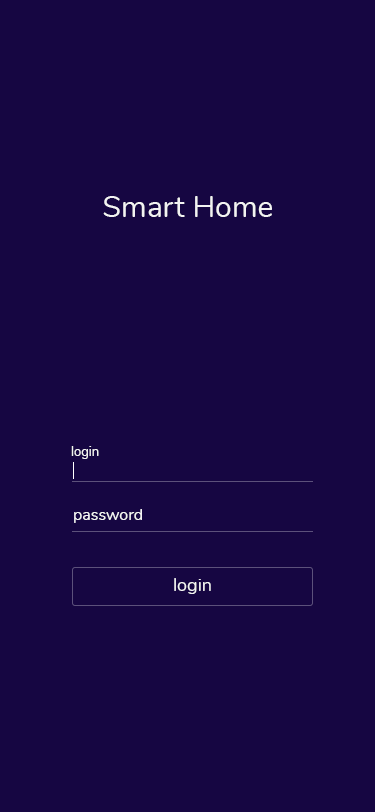
<style>
.page{position:relative;width:375px;height:812px;background:#160642}
.page>*{position:absolute;margin:0}
.t1{font:30px "Nunito-Regular";color:#f3f3f3}
.t2{font:13px "Nunito-Regular";color:#f3f3f3}
.t3{font:16px "Nunito-Regular";color:#f3f3f3}
.t4{font:18px "Nunito-Regular";color:#f3f3f3}
</style>
<div class="page">
<p class="t1" style="left:103px;top:196px;width:169px;height:21px">Smart Home</p>
<p class="t2" style="left:71px;top:446px;width:28px;height:13px">login</p>
<p class="t3" style="left:74px;top:509px;width:68px;height:14px">password</p>
<p class="t4" style="left:174px;top:578px;width:37px;height:16px">login</p>
</div>
